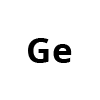
<style>
.page{position:relative;width:100px;height:100px;background:#ffffff}
.page>*{position:absolute;margin:0}
.t1{font:35px "OpenSans-Bold";color:#000000}
</style>
<div class="page">
<p class="t1" style="left:28px;top:38px;width:44px;height:25px">Ge</p>
</div>
